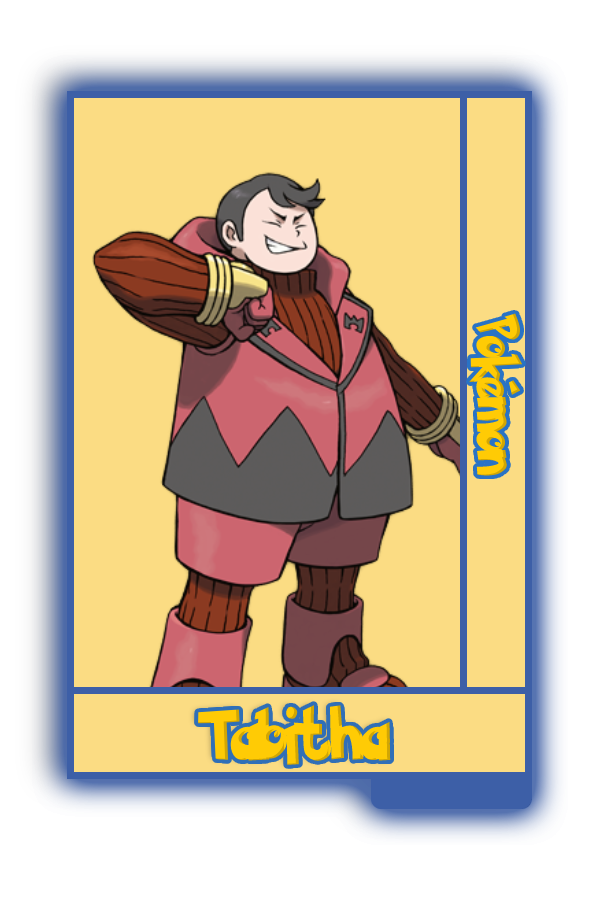
<style>
.page{position:relative;width:600px;height:900px;background:#fbdc83}
.page>*{position:absolute;margin:0}
.t1{font:48.8px "PokemonSolidNormal";color:#ffcb05;scale:0.8 1}
.t2{font:56.6px "PokemonSolidNormal";color:#ffcb05;scale:0.92 1}
</style>
<div class="page">
<p class="t1" style="left:469px;top:313px;width:54px;height:163px;rotate:90deg">Pokémon</p>
<p class="t2" style="left:198px;top:705px;width:193px;height:60px">Tabitha</p>
</div>
